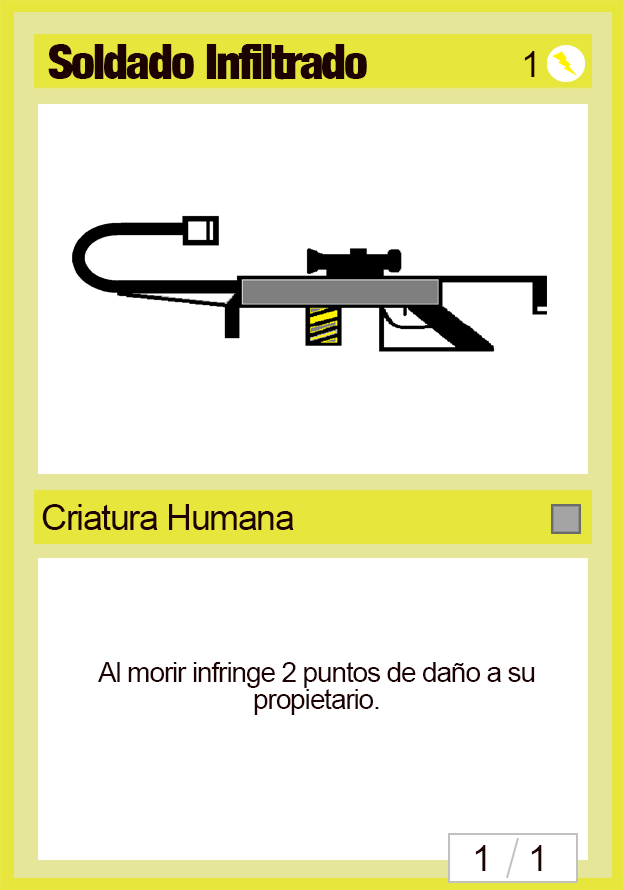
<style>
.page{position:relative;width:624px;height:890px;background:#ffffff}
.page>*{position:absolute;margin:0}
.t1{font:48px "Harvest";letter-spacing:-0.04em;color:#1d0202}
.t2{font:36px "ArialMT";letter-spacing:-0.04em;color:#1d0202}
.t3{font:28px/27px "ArialMT";letter-spacing:-0.04em;color:#1d0202}
</style>
<div class="page">
<p class="t1" style="left:48px;top:44px;width:319px;height:36px">Soldado Infiltrado</p>
<p class="t2" style="left:524px;top:51px;width:11px;height:26px">1</p>
<p class="t2" style="left:42px;top:504px;width:252px;height:26px">Criatura Humana</p>
<p class="t3" style="left:98px;top:662px;width:437px;height:53px;text-align:center">Al morir infringe 2 puntos de daño a su propietario.</p>
<p class="t2" style="left:475px;top:845px;width:11px;height:26px">1</p>
<p class="t2" style="left:531px;top:845px;width:11px;height:26px">1</p>
</div>
